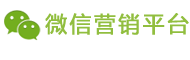
<style>
.page{position:relative;width:190px;height:60px;background:#ffffff}
.page>*{position:absolute;margin:0}
.t1{font:21.8px "MicrosoftYaHei";letter-spacing:0.1em;color:#91be3f;font-weight:bold}
</style>
<div class="page">
<p class="t1" style="left:45px;top:13px;width:144px;height:22px">微信营销平台</p>
</div>
